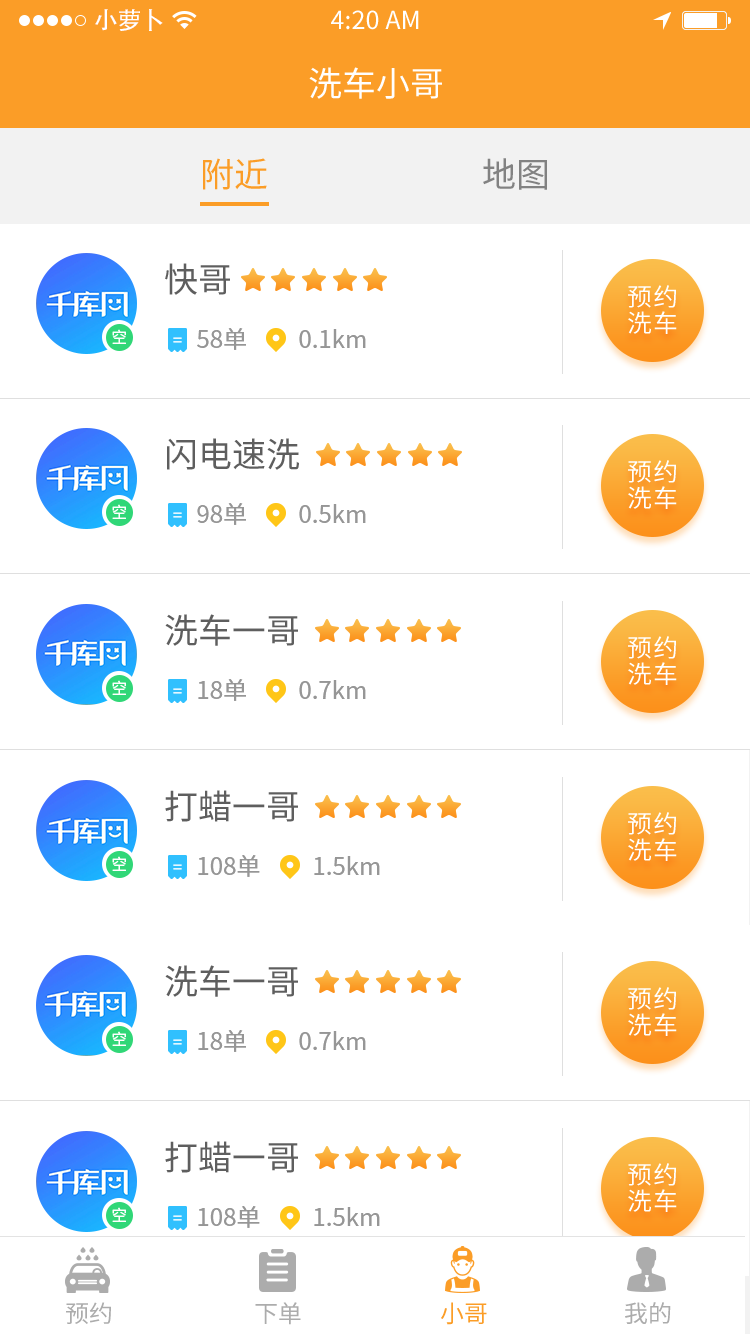
<style>
.page{position:relative;width:750px;height:1334px;background:#ffffff}
.page>*{position:absolute;margin:0}
.t1{font:24px "AdobeHeitiStd-Regular";color:#ffffff}
.t2{font:25px "SourceHanSansCN-Regular";color:#ffffff}
.t3{font:34px "SourceHanSansCN-Regular";color:#ffffff}
.t4{font:34px "SourceHanSansCN-Regular";color:#fb9d27}
.t5{font:34px "SourceHanSansCN-Regular";color:#828282}
.t6{font:34px "SourceHanSansCN-Regular";color:#5e5e5e}
.t7{font:24.7px/26.1px "SourceHanSansCN-Regular";letter-spacing:0.06em;color:#ffffff}
.t8{font:16px "SourceHanSansCN-Regular";letter-spacing:0.06em;color:#ffffff}
.t9{font:24px "SourceHanSansCN-Regular";color:#969696}
.t10{font:24px "SourceHanSansCN-Regular";color:#acacac}
.t11{font:24px "SourceHanSansCN-Regular";color:#fb9d27}
</style>
<div class="page">
<p class="t1" style="left:95px;top:9px;width:68px;height:22px">小萝卜</p>
<p class="t2" style="left:331px;top:10px;width:88px;height:20px">4:20 AM</p>
<p class="t3" style="left:309px;top:67px;width:133px;height:32px">洗车小哥</p>
<p class="t4" style="left:203px;top:158px;width:64px;height:32px">附近</p>
<p class="t5" style="left:483px;top:158px;width:64px;height:32px">地图</p>
<p class="t6" style="left:165px;top:263px;width:65px;height:32px">快哥</p>
<p class="t7" style="left:628px;top:285px;width:49px;height:49px">预约<br>洗车</p>
<p class="t8" style="left:112px;top:329px;width:14px;height:15px">空</p>
<p class="t9" style="left:197px;top:328px;width:49px;height:22px">58单</p>
<p class="t9" style="left:299px;top:329px;width:67px;height:19px">0.1km</p>
<p class="t6" style="left:167px;top:438px;width:132px;height:32px">闪电速洗</p>
<p class="t7" style="left:628px;top:460px;width:49px;height:49px">预约<br>洗车</p>
<p class="t8" style="left:112px;top:504px;width:14px;height:15px">空</p>
<p class="t9" style="left:197px;top:503px;width:49px;height:22px">98单</p>
<p class="t9" style="left:299px;top:504px;width:67px;height:19px">0.5km</p>
<p class="t6" style="left:165px;top:614px;width:133px;height:32px">洗车一哥</p>
<p class="t7" style="left:628px;top:636px;width:49px;height:49px">预约<br>洗车</p>
<p class="t8" style="left:112px;top:680px;width:14px;height:15px">空</p>
<p class="t9" style="left:198px;top:679px;width:48px;height:22px">18单</p>
<p class="t9" style="left:299px;top:680px;width:67px;height:19px">0.7km</p>
<p class="t6" style="left:165px;top:790px;width:133px;height:32px">打蜡一哥</p>
<p class="t7" style="left:628px;top:812px;width:49px;height:49px">预约<br>洗车</p>
<p class="t8" style="left:112px;top:856px;width:14px;height:15px">空</p>
<p class="t9" style="left:198px;top:855px;width:62px;height:22px">108单</p>
<p class="t9" style="left:314px;top:856px;width:66px;height:19px">1.5km</p>
<p class="t6" style="left:165px;top:965px;width:133px;height:32px">洗车一哥</p>
<p class="t7" style="left:628px;top:987px;width:49px;height:49px">预约<br>洗车</p>
<p class="t8" style="left:112px;top:1031px;width:14px;height:15px">空</p>
<p class="t9" style="left:198px;top:1030px;width:48px;height:22px">18单</p>
<p class="t9" style="left:299px;top:1031px;width:67px;height:19px">0.7km</p>
<p class="t6" style="left:165px;top:1141px;width:133px;height:32px">打蜡一哥</p>
<p class="t7" style="left:628px;top:1163px;width:49px;height:49px">预约<br>洗车</p>
<p class="t9" style="left:198px;top:1206px;width:62px;height:22px">108单</p>
<p class="t8" style="left:112px;top:1207px;width:14px;height:15px">空</p>
<p class="t9" style="left:314px;top:1207px;width:66px;height:19px">1.5km</p>
<p class="t10" style="left:66px;top:1302px;width:45px;height:22px">预约</p>
<p class="t10" style="left:255px;top:1302px;width:46px;height:23px">下单</p>
<p class="t11" style="left:441px;top:1302px;width:46px;height:23px">小哥</p>
<p class="t10" style="left:625px;top:1302px;width:46px;height:22px">我的</p>
</div>
